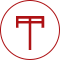
<style>
.page{position:relative;width:60px;height:60px;background:#ffffff}
.page>*{position:absolute;margin:0}
.t1{font:48px "NordicAlternative";color:#ae1215}
</style>
<div class="page">
<p class="t1" style="left:16px;top:16px;width:29px;height:34px">T</p>
</div>
